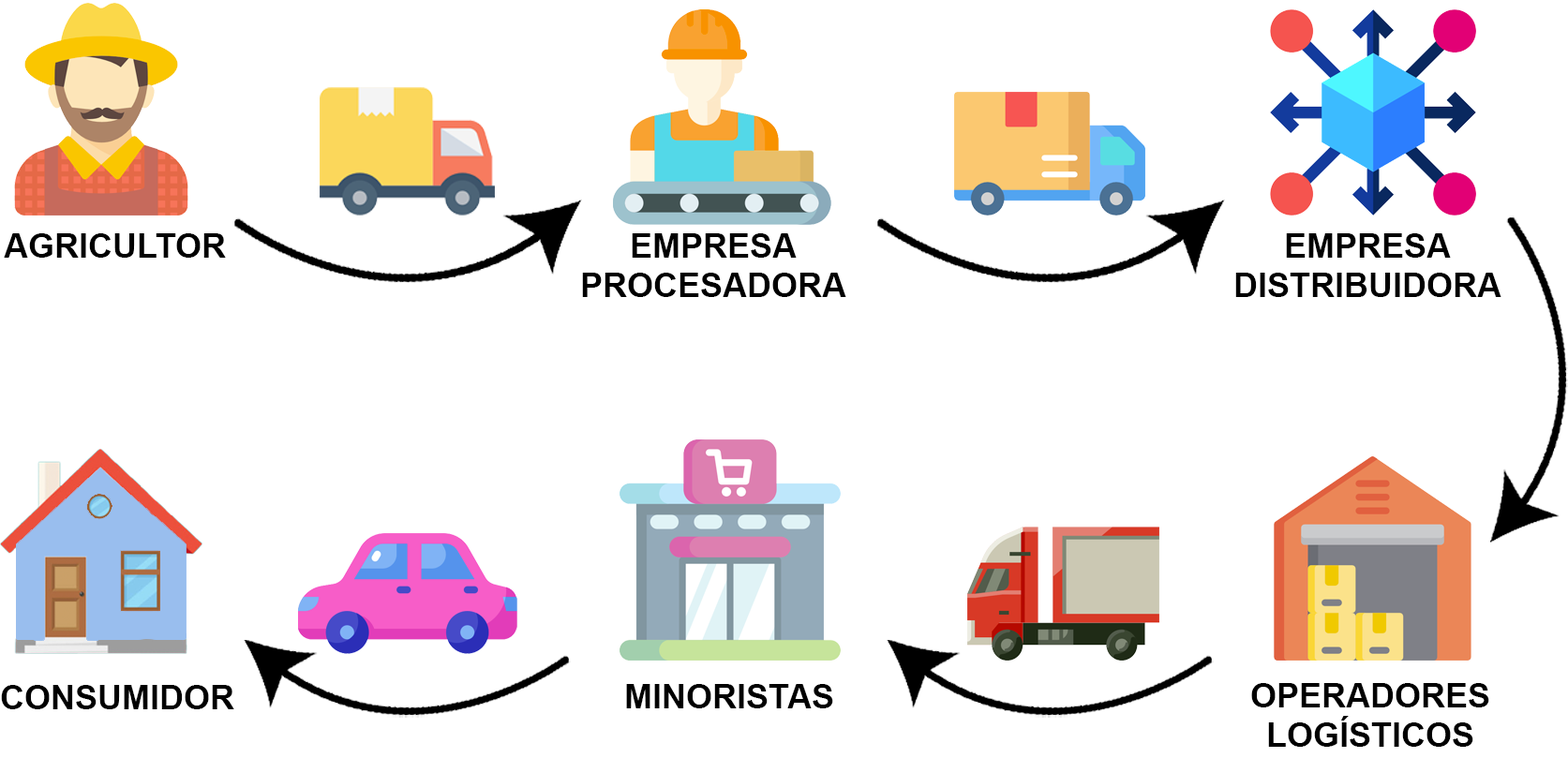
<style>
.page{position:relative;width:1568px;height:758px;background:#ffffff}
.page>*{position:absolute;margin:0}
.t1{font:33.7px "Arial-BoldMT";color:#000000}
.t2{font:33.7px/39.4px "Arial-BoldMT";color:#000000}
</style>
<div class="page">
<p class="t1" style="left:4px;top:233px;width:222px;height:25px">AGRICULTOR</p>
<p class="t2" style="left:582px;top:233px;width:264px;height:64px;text-align:center">EMPRESA<br>PROCESADORA</p>
<p class="t2" style="left:1235px;top:233px;width:266px;height:64px;text-align:center">EMPRESA<br>DISTRIBUIDORA</p>
<p class="t1" style="left:1px;top:685px;width:233px;height:24px">CONSUMIDOR</p>
<p class="t1" style="left:626px;top:684px;width:207px;height:25px">MINORISTAS</p>
<p class="t2" style="left:1251px;top:683px;width:238px;height:64px;text-align:center">OPERADORES LOGÍSTICOS</p>
</div>
